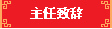
<style>
.page{position:relative;width:112px;height:29px;background:#ed1b24}
.page>*{position:absolute;margin:0}
.t1{font:14px "SimHei";letter-spacing:-0.075em;color:#ffffff;font-weight:bold}
</style>
<div class="page">
<p class="t1" style="left:30px;top:7px;width:53px;height:12px">主任致辞</p>
</div>
